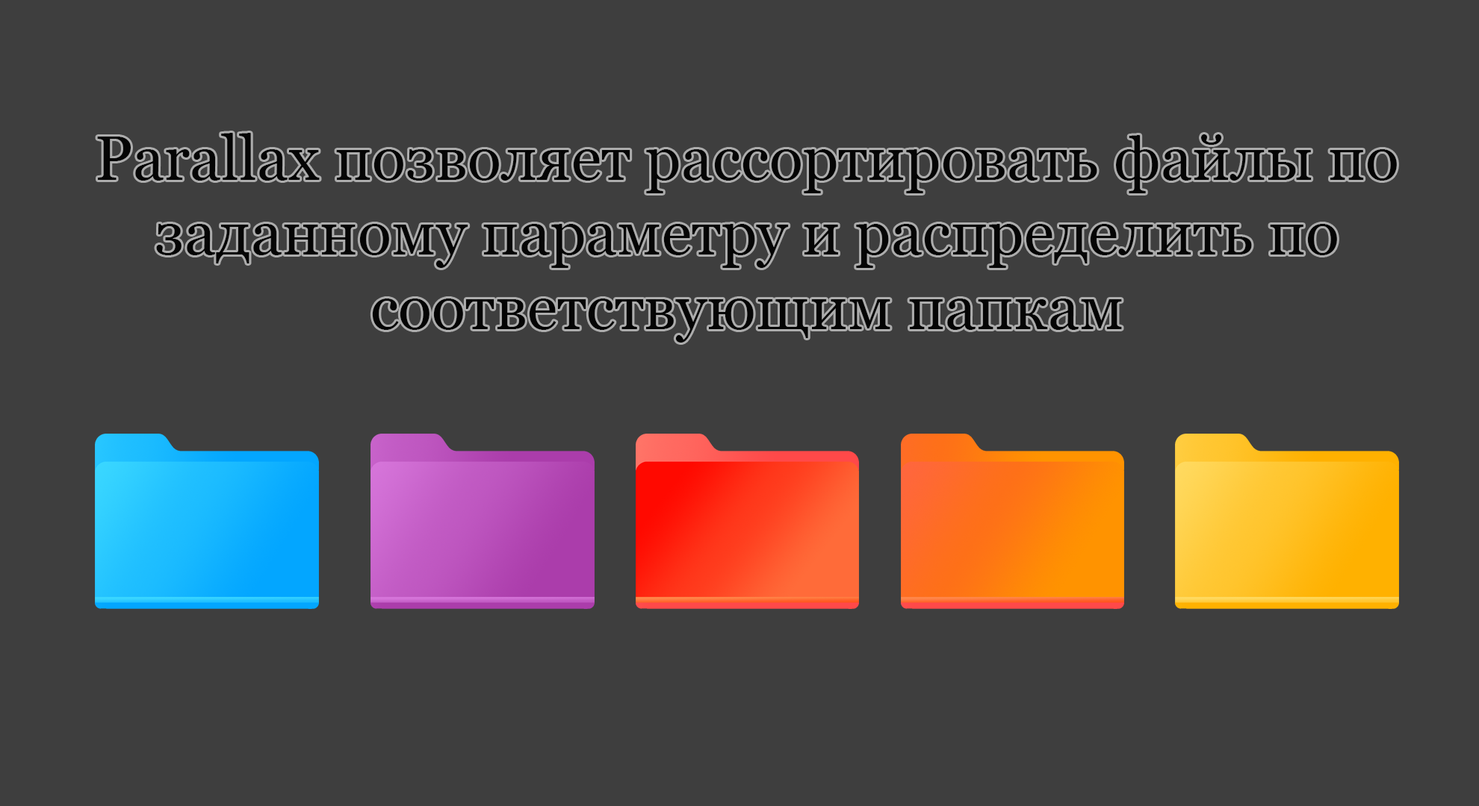
<style>
.page{position:relative;width:1479px;height:806px;background:#3e3e3e}
.page>*{position:absolute;margin:0}
.t1{font:62.2px "Georgia";color:#050505}
</style>
<div class="page">
<p class="t1" style="left:97px;top:133px;width:1299px;height:210px;text-align:center">Parallax позволяет рассортировать файлы по заданному параметру и распределить по соответствующим папкам</p>
</div>
